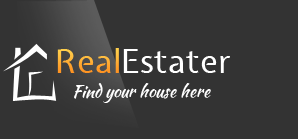
<style>
.page{position:relative;width:298px;height:139px;background:#333333}
.page>*{position:absolute;margin:0}
.t1{font:33.3px "ExpletusSans";color:#ffffff}
.t2{font:33.3px "ExpletusSans";color:#ffb137}
.t3{font:16.7px "KaushanScript-Regular";color:#ffffff}
</style>
<div class="page">
<p class="t1" style="left:57px;top:48px;width:173px;height:25px"><span class="t2">Real</span>Estater</p>
<p class="t3" style="left:74px;top:83px;width:137px;height:20px">Find your house here</p>
</div>
